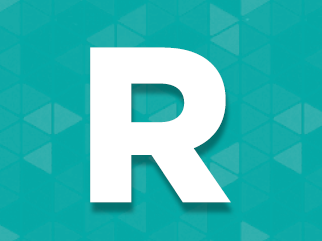
<style>
.page{position:relative;width:322px;height:241px}
.page>*{position:absolute;margin:0}
.t1{font:212.1px "GothamSSm-Black";letter-spacing:-0.005em;color:#ffffff}
</style>
<div class="page">
<p class="t1" style="left:90px;top:47px;width:141px;height:156px">R</p>
</div>
